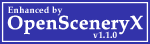
<style>
.page{position:relative;width:150px;height:44px;background:#3333aa}
.page>*{position:absolute;margin:0}
.t1{font:9.1px "BookAntiqua-Bold";letter-spacing:0.02em;color:#ffffff}
.t2{font:19.4px "BookAntiqua-Bold";letter-spacing:0.02em;color:#ffffff}
</style>
<div class="page">
<p class="t1" style="left:8px;top:6px;width:55px;height:10px">Enhanced by</p>
<p class="t2" style="left:7px;top:15px;width:136px;height:20px">OpenSceneryX</p>
<p class="t1" style="left:93px;top:31px;width:24px;height:7px">v1.1.0</p>
</div>
